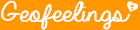
<style>
.page{position:relative;width:140px;height:30px;background:#ff9800}
.page>*{position:absolute;margin:0}
.t1{font:30px "AlwaysInMyHeart";color:#ffffff;scale:1.25 1}
</style>
<div class="page">
<p class="t1" style="left:0px;top:0px;width:131px;height:30px">Geofeelings</p>
</div>
